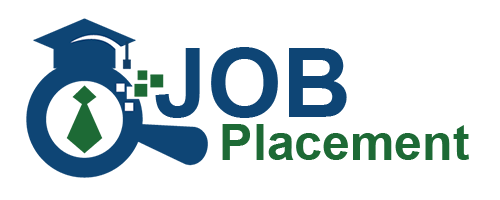
<style>
.page{position:relative;width:500px;height:200px;background:#ffffff}
.page>*{position:absolute;margin:0}
.t1{font:95.8px "Arial-BoldMT";color:#0e4575}
.t2{font:50px "Arial-BoldMT";color:#1d6a35}
</style>
<div class="page">
<p class="t1" style="left:155px;top:47px;width:192px;height:71px">JOB</p>
<p class="t2" style="left:222px;top:124px;width:247px;height:36px">Placement</p>
</div>
